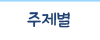
<style>
.page{position:relative;width:100px;height:40px;background:#ffffff}
.page>*{position:absolute;margin:0}
.t1{font:16.7px "THEAlien";color:#214274}
</style>
<div class="page">
<p class="t1" style="left:27px;top:12px;width:43px;height:16px">주제별</p>
</div>
